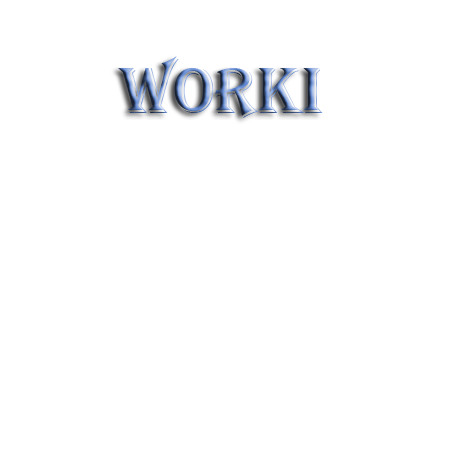
<style>
.page{position:relative;width:460px;height:460px;background:#ffffff}
.page>*{position:absolute;margin:0}
.t1{font:66.7px "Algerian"}
</style>
<div class="page">
<p class="t1" style="left:118px;top:56px;width:205px;height:62px">Worki</p>
</div>
